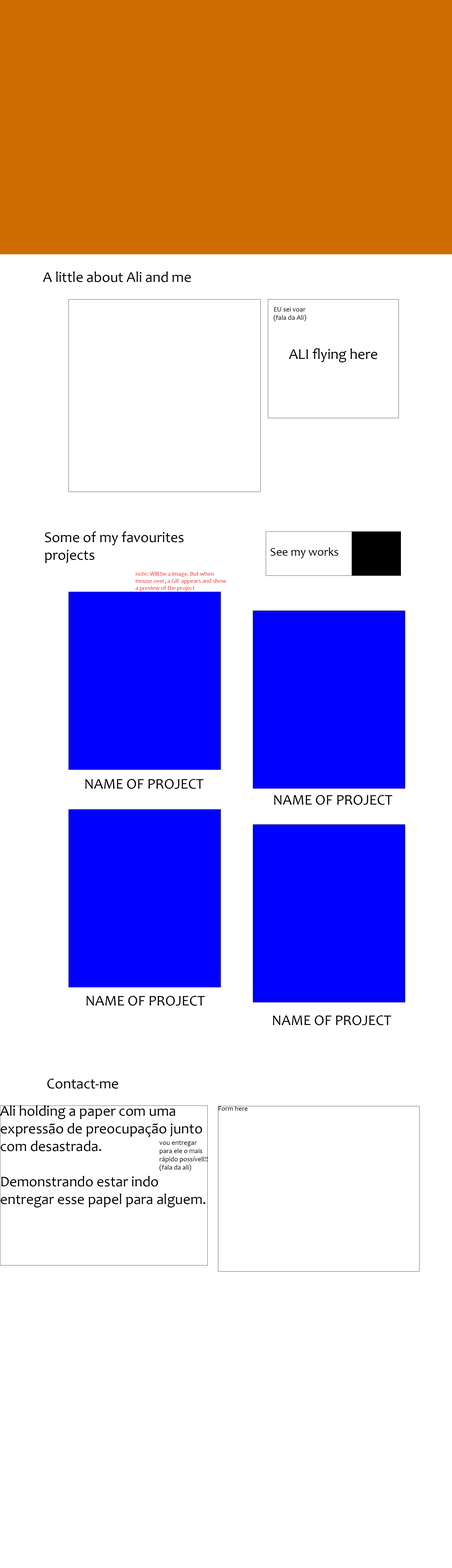
<style>
.page{position:relative;width:452px;height:1568px;background:#ffffff}
.page>*{position:absolute;margin:0}
.t1{font:14.7px "Candara";color:#000000}
.t2{font:6.9px "Candara";color:#000000}
.t3{font:11.8px "Candara";color:#000000}
.t4{font:5.9px "Candara";color:#f81616}
</style>
<div class="page">
<p class="t1" style="left:43px;top:271px;width:148px;height:11px">A little about Ali and me</p>
<p class="t2" style="left:274px;top:307px;width:32px;height:14px">EU sei voar<br>(fala da Ali)</p>
<p class="t1" style="left:289px;top:348px;width:88px;height:14px">ALI flying here</p>
<p class="t1" style="left:45px;top:531px;width:139px;height:32px">Some of my favourites<br>projects</p>
<p class="t3" style="left:271px;top:547px;width:67px;height:11px"><span class="t1"><br></span>See my works</p>
<p class="t4" style="left:136px;top:572px;width:90px;height:19px">note: Will be a image. But when<br>mouse over, a GIF appears and show<br>a preview of the project</p>
<p class="t1" style="left:85px;top:779px;width:119px;height:10px">NAME OF PROJECT</p>
<p class="t1" style="left:274px;top:795px;width:119px;height:10px">NAME OF PROJECT</p>
<p class="t1" style="left:86px;top:996px;width:119px;height:10px">NAME OF PROJECT</p>
<p class="t1" style="left:273px;top:1015px;width:118px;height:10px">NAME OF PROJECT</p>
<p class="t1" style="left:47px;top:1079px;width:71px;height:10px">Contact-me</p>
<p class="t1" style="left:0px;top:1105px;width:206px;height:102px">Ali holding a paper com uma expressão de preocupação junto com desastrada. <br><br>Demonstrando estar indo entregar esse papel para alguem.</p>
<p class="t2" style="left:219px;top:1106px;width:29px;height:5px">Form here</p>
<p class="t2" style="left:159px;top:1141px;width:48px;height:30px">vou entregar <br>para ele o mais <br>rápido possívell!!<br>(fala da ali)</p>
</div>
